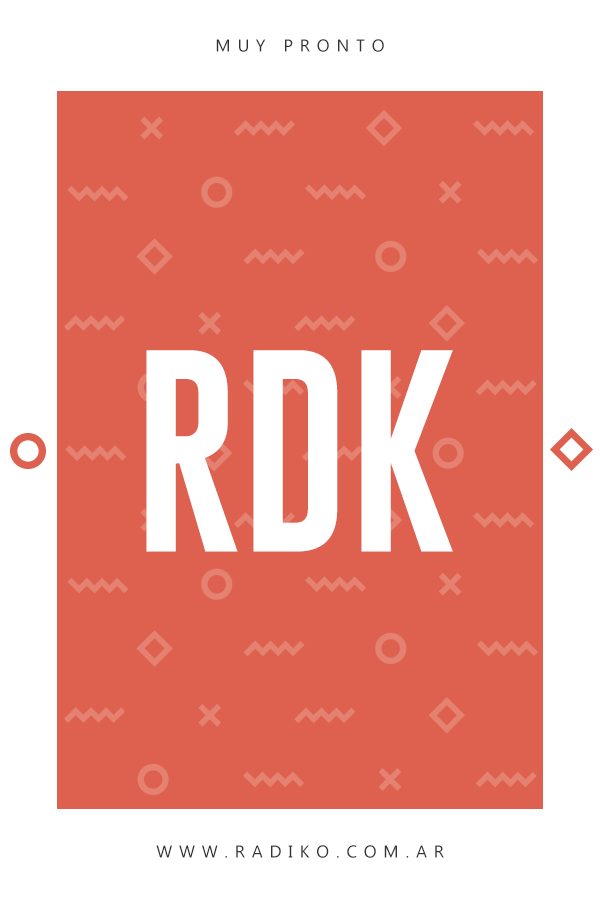
<style>
.page{position:relative;width:600px;height:900px;background:#dd614e}
.page>*{position:absolute;margin:0}
.t1{font:17px "Ebrima";letter-spacing:0.4em;color:#333333;text-transform:uppercase}
.t2{font:210px "Gobold";color:#ffffff;text-transform:uppercase}
</style>
<div class="page">
<p class="t1" style="left:216px;top:39px;width:168px;height:13px">MUY PRONTO</p>
<p class="t2" style="left:146px;top:350px;width:307px;height:202px">RDK</p>
<p class="t1" style="left:156px;top:845px;width:288px;height:13px">www.radiko.com.ar</p>
</div>
